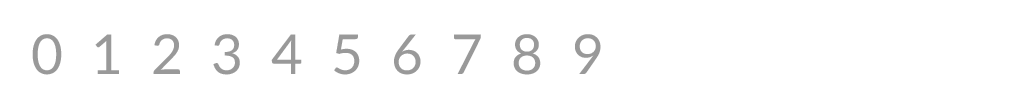
<style>
.page{position:relative;width:1024px;height:100px;background:#ffffff}
.page>*{position:absolute;margin:0}
.t1{font:55px "Lato-Regular";color:#999999}
</style>
<div class="page">
<p class="t1" style="left:32px;top:34px;width:569px;height:41px">0  1  2  3  4  5  6  7  8  9</p>
</div>
